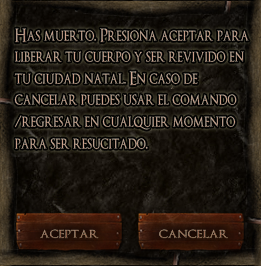
<style>
.page{position:relative;width:261px;height:266px}
.page>*{position:absolute;margin:0}
.t1{font:18px "OptimusPrinceps";color:#cd9f88;scale:0.82 1}
.t2{font:14.4px "OptimusPrinceps";scale:1.13 1}
.t3{font:14.4px "OptimusPrinceps";color:#986851;scale:1.13 1}
</style>
<div class="page">
<p class="t1" style="left:14px;top:28px;width:235px;height:122px">Has muerto. Presiona aceptar para liberar tu cuerpo y ser revivido en tu ciudad natal. En caso de cancelar puedes usar el comando /regresar en cualquier momento para ser resucitado.</p>
<p class="t2" style="left:40px;top:229px;width:59px;height:10px">aceptar</p>
<p class="t3" style="left:159px;top:229px;width:69px;height:10px">cancelar</p>
</div>
